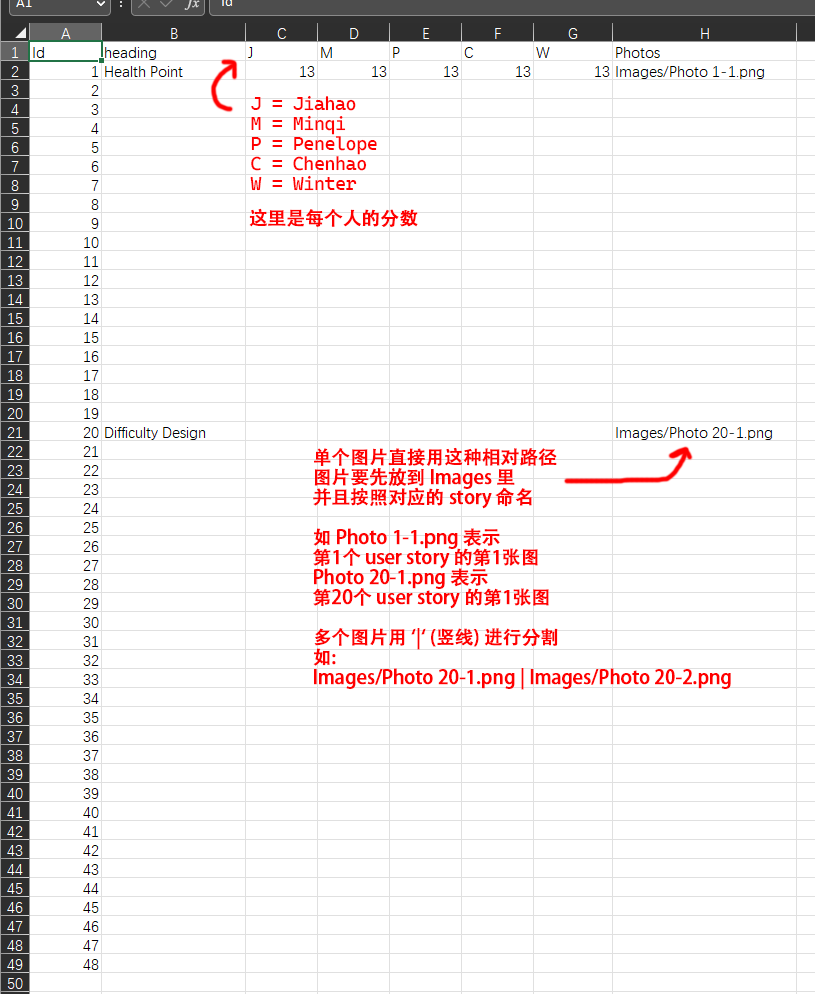
<style>
.page{position:relative;width:815px;height:994px;background:#ffffff}
.page>*{position:absolute;margin:0}
.t1{font:18.7px/20px "CascadiaMono-Roman";letter-spacing:-0.02em;color:#ff0000;font-weight:bold}
.t2{font:18.7px "AdobeHeitiStd-Regular";letter-spacing:-0.02em;color:#ff0000;font-weight:bold}
.t3{font:18.7px/20px "AdobeHeitiStd-Regular";letter-spacing:-0.02em;color:#ff0000;font-weight:bold}
</style>
<div class="page">
<p class="t1" style="left:250px;top:95px;width:127px;height:96px">J = Jiahao<br>M = Minqi<br>P = Penelope<br>C = Chenhao<br>W = Winter</p>
<p class="t2" style="left:249px;top:208px;width:169px;height:19px">这里是每个人的分数</p>
<p class="t3" style="left:313px;top:447px;width:418px;height:243px">单个图片直接用这种相对路径<br>图片要先放到 Images 里<br>并且按照对应的 story 命名<br><br>如 Photo 1-1.png 表示<br>第1个 user story 的第1张图<br>Photo 20-1.png 表示<br>第20个 user story 的第1张图<br><br>多个图片用 `|` (竖线) 进行分割<br>如: <br>Images/Photo 20-1.png | Images/Photo 20-2.png</p>
</div>
